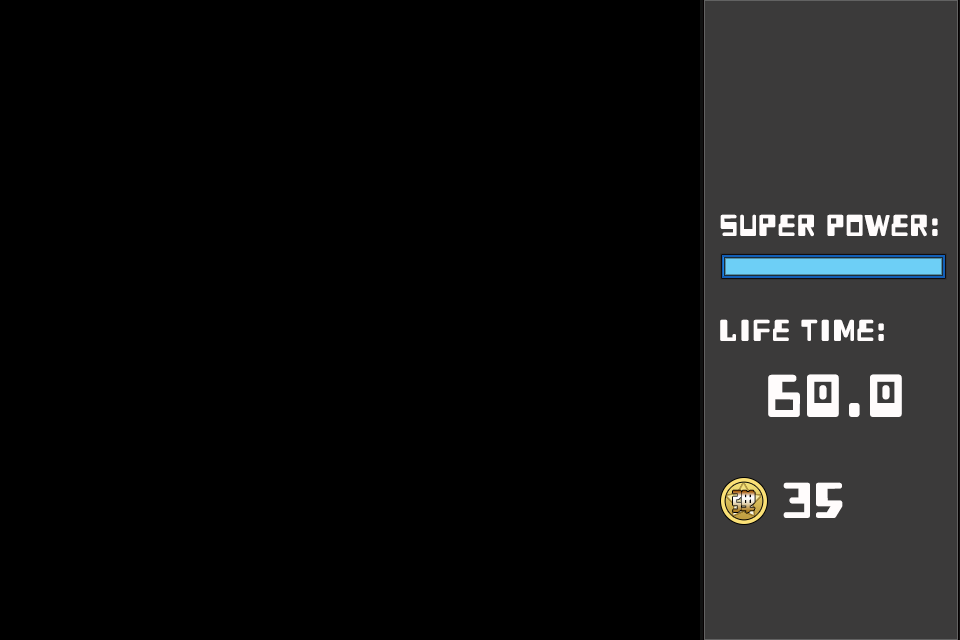
<style>
.page{position:relative;width:960px;height:640px;background:#000000}
.page>*{position:absolute;margin:0}
.t1{font:36px "HeavyData";color:#fffcfc}
.t2{font:72px "HeavyData";color:#fffcfc}
.t3{font:60px "HeavyData";color:#fffcfc}
.t4{font:24px "HYk2gj"}
</style>
<div class="page">
<p class="t1" style="left:720px;top:214px;width:218px;height:23px">SUPER POWER:</p>
<p class="t1" style="left:720px;top:319px;width:164px;height:22px">LIFE TIME:</p>
<p class="t2" style="left:768px;top:374px;width:134px;height:43px">60.0</p>
<p class="t3" style="left:783px;top:482px;width:60px;height:36px">35</p>
<p class="t4" style="left:733px;top:490px;width:22px;height:23px">弹</p>
</div>
